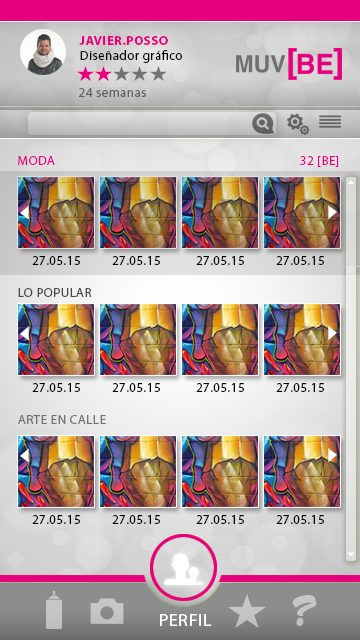
<style>
.page{position:relative;width:360px;height:640px}
.page>*{position:absolute;margin:0}
.t1{font:13px "MyriadPro-Bold";letter-spacing:0.035em;color:#e6007e}
.t2{font:13px "MyriadPro-Regular";letter-spacing:0.035em;color:#020202}
.t3{font:13px "MyriadPro-Regular";letter-spacing:0.035em;color:#6a6a6a}
.t4{font:13px "MyriadPro-Regular";letter-spacing:0.035em;color:#e6007e}
.t5{font:13px "MyriadPro-Regular";letter-spacing:0.035em;color:#040404}
.t6{font:13px "MyriadPro-Regular";letter-spacing:0.035em;color:#494848}
.t7{font:13px "MyriadPro-Regular";letter-spacing:0.035em;color:#737373}
.t8{font:35.4px "CandyScript";letter-spacing:0.035em;color:#c6c6c6}
.t9{font:17.5px "MyriadPro-Regular";letter-spacing:0.035em;color:#fefefe;scale:1.03 1}
</style>
<div class="page">
<p class="t1" style="left:79px;top:36px;width:89px;height:9px">JAVIER.POSSO</p>
<p class="t2" style="left:80px;top:50px;width:102px;height:13px">Diseñador gráfico</p>
<p class="t3" style="left:79px;top:88px;width:67px;height:9px">24 semanas</p>
<p class="t4" style="left:18px;top:156px;width:37px;height:9px">MODA</p>
<p class="t4" style="left:300px;top:156px;width:39px;height:11px">32 [BE]</p>
<p class="t5" style="left:32px;top:256px;width:48px;height:9px">27.05.15</p>
<p class="t5" style="left:112px;top:256px;width:48px;height:9px">27.05.15</p>
<p class="t5" style="left:196px;top:256px;width:48px;height:9px">27.05.15</p>
<p class="t5" style="left:276px;top:256px;width:48px;height:9px">27.05.15</p>
<p class="t6" style="left:18px;top:288px;width:74px;height:9px">LO POPULAR</p>
<p class="t5" style="left:32px;top:383px;width:48px;height:9px">27.05.15</p>
<p class="t5" style="left:112px;top:383px;width:48px;height:9px">27.05.15</p>
<p class="t5" style="left:196px;top:383px;width:48px;height:9px">27.05.15</p>
<p class="t5" style="left:276px;top:383px;width:48px;height:9px">27.05.15</p>
<p class="t7" style="left:18px;top:415px;width:88px;height:9px">ARTE EN CALLE</p>
<p class="t5" style="left:32px;top:515px;width:48px;height:9px">27.05.15</p>
<p class="t5" style="left:112px;top:515px;width:48px;height:9px">27.05.15</p>
<p class="t5" style="left:196px;top:515px;width:48px;height:9px">27.05.15</p>
<p class="t5" style="left:276px;top:515px;width:48px;height:9px">27.05.15</p>
<p class="t8" style="left:292px;top:595px;width:25px;height:31px">?</p>
<p class="t9" style="left:160px;top:614px;width:52px;height:12px">PERFIL</p>
</div>
